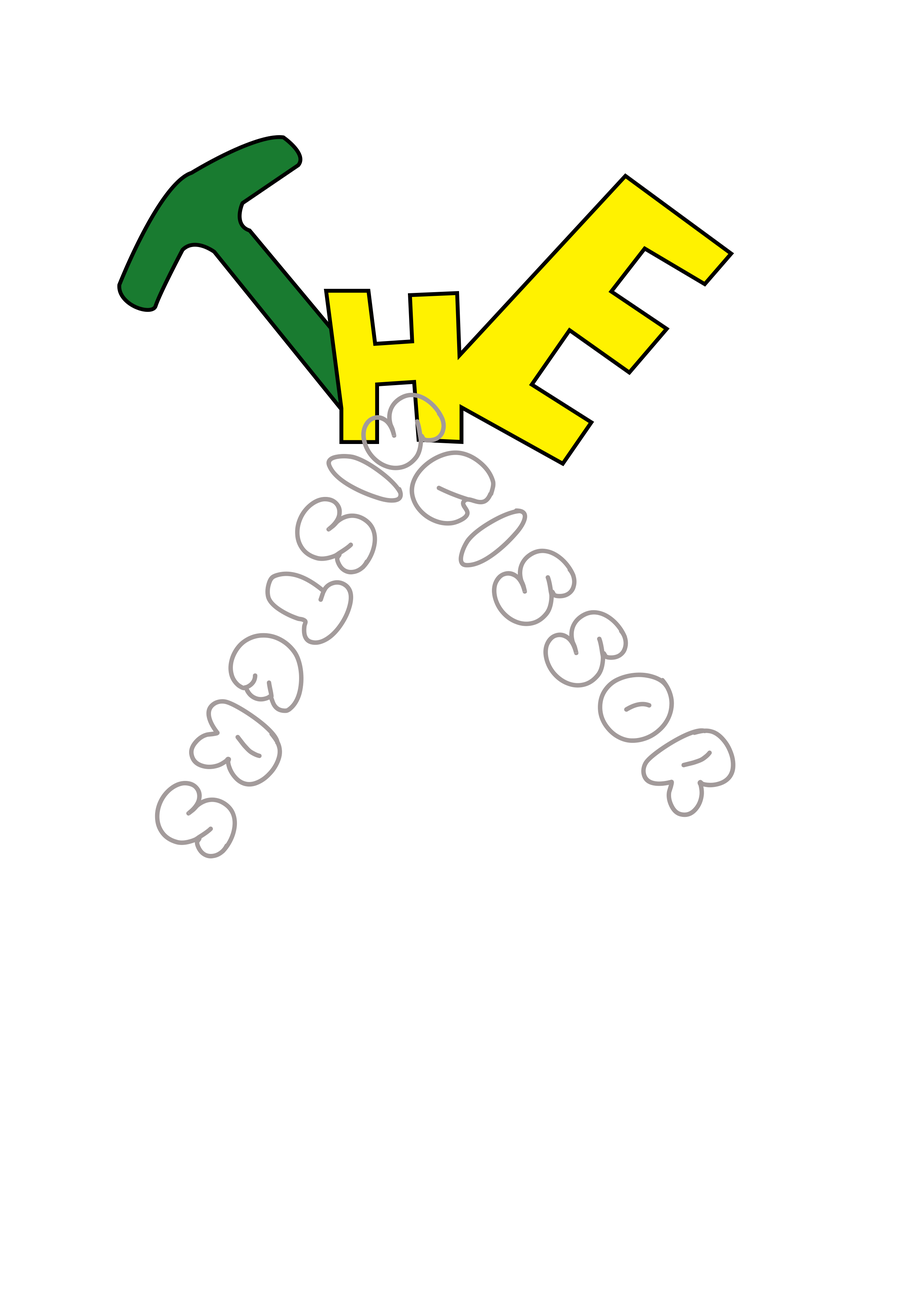
<style>
.page{position:relative;width:918px;height:1299px;background:#ffffff}
.page>*{position:absolute;margin:0}
.t1{font:111.1px "SimpleRounded";color:#a29a9a}
.t2{font:111.1px "SimpleRounded";color:#a39b9b}
</style>
<div class="page">
<p class="t1" style="left:361px;top:392px;width:375px;height:425px;rotate:50deg">SCISSOR</p>
<p class="t2" style="left:155px;top:454px;width:248px;height:405px;rotate:116deg">ISTERS</p>
</div>
